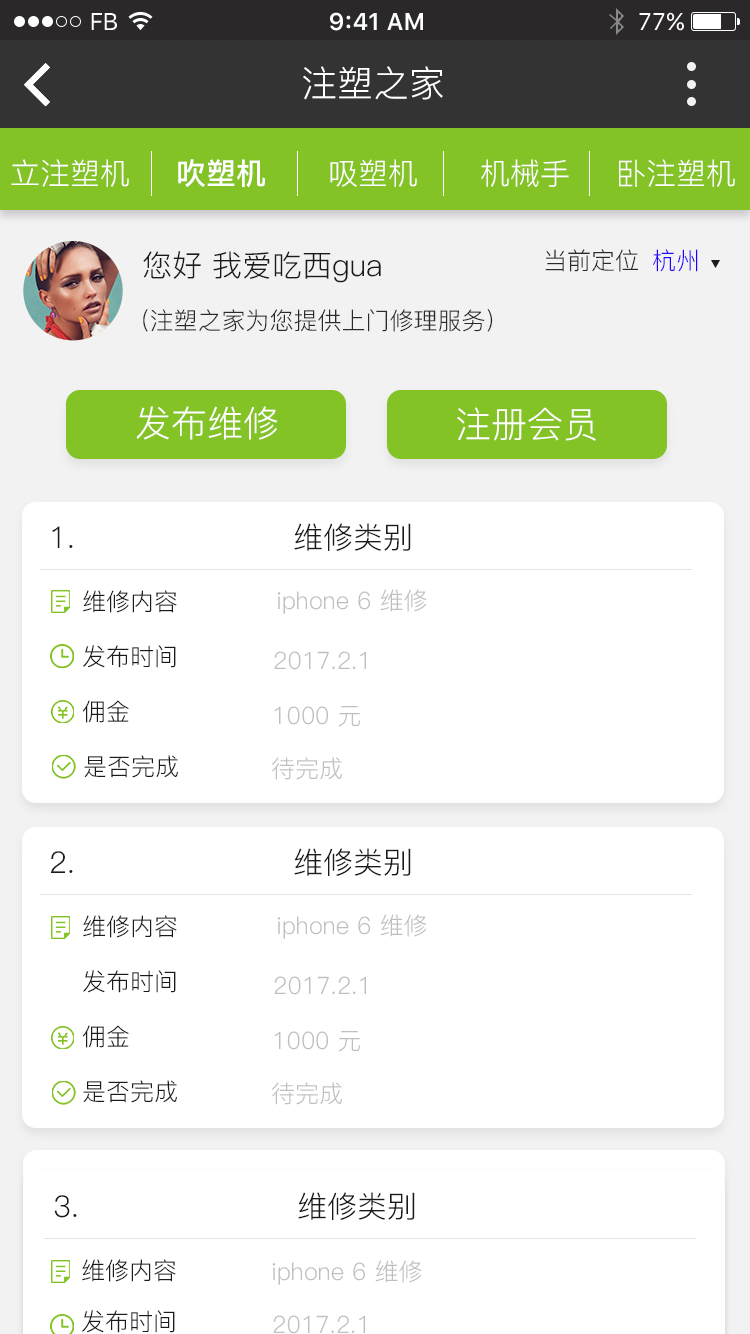
<style>
.page{position:relative;width:750px;height:1334px;background:#ffffff}
.page>*{position:absolute;margin:0}
.t1{font:36px "PingFang-SC-Regular";color:#ffffff}
.t2{font:30px "PingFang-SC-Regular";color:#ffffff}
.t3{font:30px "PingFang-SC-Bold";color:#ffffff}
.t4{font:30px "PingFang-SC-Regular";color:#1a1a1a}
.t5{font:24px "PingFang-SC-Regular";color:#2a2829}
.t6{font:24px "PingFang-SC-Regular";color:#1f01ff}
.t7{font:24px "PingFang-SC-Regular";color:#1a1a1a}
.t8{font:24px "PingFang-SC-Regular";color:#bfbfbf}
</style>
<div class="page">
<p class="t1" style="left:303px;top:66px;width:140px;height:34px">注塑之家</p>
<p class="t2" style="left:11px;top:159px;width:118px;height:28px">立注塑机</p>
<p class="t3" style="left:178px;top:159px;width:87px;height:29px">吹塑机</p>
<p class="t2" style="left:330px;top:159px;width:87px;height:28px">吸塑机</p>
<p class="t2" style="left:481px;top:159px;width:88px;height:28px">机械手</p>
<p class="t2" style="left:619px;top:159px;width:116px;height:28px">卧注塑机</p>
<p class="t4" style="left:143px;top:251px;width:238px;height:32px">您好 我爱吃西gua</p>
<p class="t5" style="left:545px;top:249px;width:93px;height:23px">当前定位</p>
<p class="t6" style="left:653px;top:249px;width:45px;height:23px">杭州</p>
<p class="t5" style="left:143px;top:309px;width:350px;height:23px">(注塑之家为您提供上门修理服务）</p>
<p class="t1" style="left:136px;top:406px;width:142px;height:34px">发布维修</p>
<p class="t1" style="left:457px;top:407px;width:139px;height:34px">注册会员</p>
<p class="t4" style="left:52px;top:526px;width:21px;height:22px">1.</p>
<p class="t4" style="left:294px;top:523px;width:117px;height:28px">维修类别</p>
<p class="t7" style="left:83px;top:590px;width:94px;height:23px">维修内容</p>
<p class="t8" style="left:277px;top:589px;width:150px;height:25px">iphone 6 维修</p>
<p class="t7" style="left:83px;top:645px;width:93px;height:23px">发布时间</p>
<p class="t8" style="left:274px;top:651px;width:92px;height:19px">2017.2.1</p>
<p class="t7" style="left:82px;top:700px;width:47px;height:23px">佣金</p>
<p class="t8" style="left:274px;top:706px;width:86px;height:21px">1000 元</p>
<p class="t7" style="left:84px;top:755px;width:94px;height:23px">是否完成</p>
<p class="t8" style="left:272px;top:757px;width:70px;height:23px">待完成</p>
<p class="t4" style="left:51px;top:851px;width:22px;height:22px">2.</p>
<p class="t4" style="left:294px;top:848px;width:117px;height:28px">维修类别</p>
<p class="t7" style="left:83px;top:915px;width:94px;height:23px">维修内容</p>
<p class="t8" style="left:277px;top:914px;width:150px;height:25px">iphone 6 维修</p>
<p class="t7" style="left:83px;top:970px;width:93px;height:23px">发布时间</p>
<p class="t8" style="left:274px;top:976px;width:92px;height:19px">2017.2.1</p>
<p class="t7" style="left:82px;top:1025px;width:47px;height:23px">佣金</p>
<p class="t8" style="left:274px;top:1031px;width:86px;height:21px">1000 元</p>
<p class="t7" style="left:83px;top:1080px;width:94px;height:23px">是否完成</p>
<p class="t8" style="left:272px;top:1082px;width:70px;height:23px">待完成</p>
<p class="t4" style="left:298px;top:1192px;width:117px;height:28px">维修类别</p>
<p class="t4" style="left:54px;top:1195px;width:23px;height:23px">3.</p>
<p class="t7" style="left:82px;top:1259px;width:94px;height:23px">维修内容</p>
<p class="t8" style="left:272px;top:1260px;width:150px;height:25px">iphone 6 维修</p>
<p class="t7" style="left:82px;top:1310px;width:93px;height:23px">发布时间</p>
<p class="t8" style="left:273px;top:1315px;width:92px;height:19px">2017.2.1</p>
</div>
